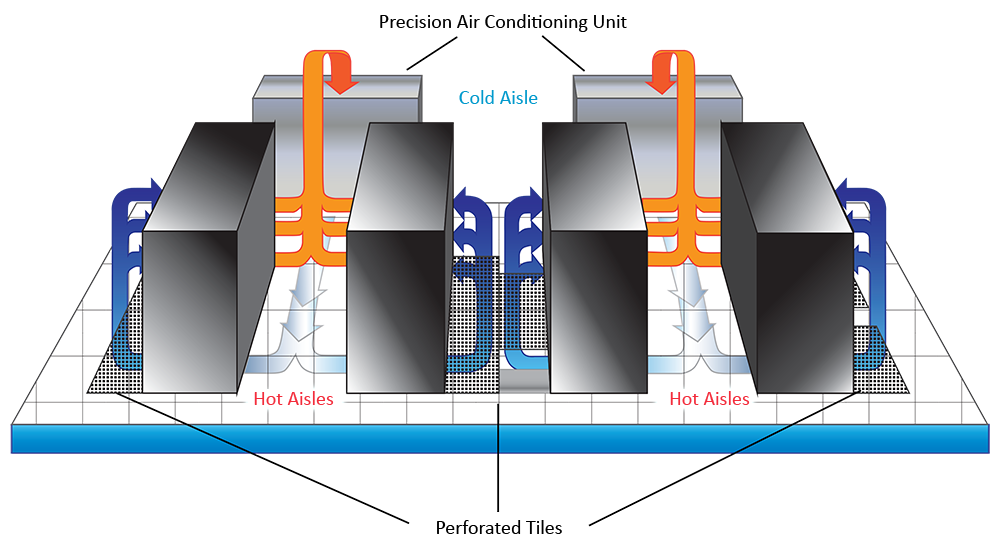
<style>
.page{position:relative;width:1000px;height:550px;background:#ffffff}
.page>*{position:absolute;margin:0}
.t1{font:20px "Calibri";color:#000000}
.t2{font:20px "Calibri";color:#0099cc}
.t3{font:20px "Calibri";color:#f32c3b}
</style>
<div class="page">
<p class="t1" style="left:380px;top:14px;width:247px;height:18px">Precision Air Conditioning Unit</p>
<p class="t2" style="left:459px;top:90px;width:79px;height:14px">Cold Aisle</p>
<p class="t3" style="left:254px;top:391px;width:80px;height:14px">Hot Aisles</p>
<p class="t3" style="left:670px;top:391px;width:80px;height:14px">Hot Aisles</p>
<p class="t1" style="left:437px;top:520px;width:125px;height:14px">Perforated Tiles</p>
</div>
